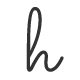
<style>
.page{position:relative;width:80px;height:80px;background:#ffffff}
.page>*{position:absolute;margin:0}
.t1{font:90px "Sacramento-Regular";color:#333333}
</style>
<div class="page">
<p class="t1" style="left:26px;top:7px;width:38px;height:65px">h</p>
</div>
